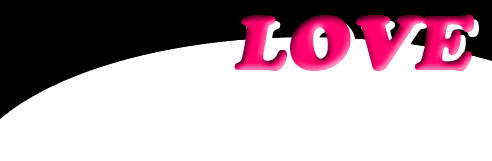
<style>
.page{position:relative;width:492px;height:161px;background:#ffffff}
.page>*{position:absolute;margin:0}
.t1{font:75px "CooperBlackStd";font-weight:bold;font-style:italic}
</style>
<div class="page">
<p class="t1" style="left:234px;top:14px;width:240px;height:57px">LOVE</p>
<p class="t1" style="left:239px;top:19px;width:240px;height:57px">LOVE</p>
</div>
